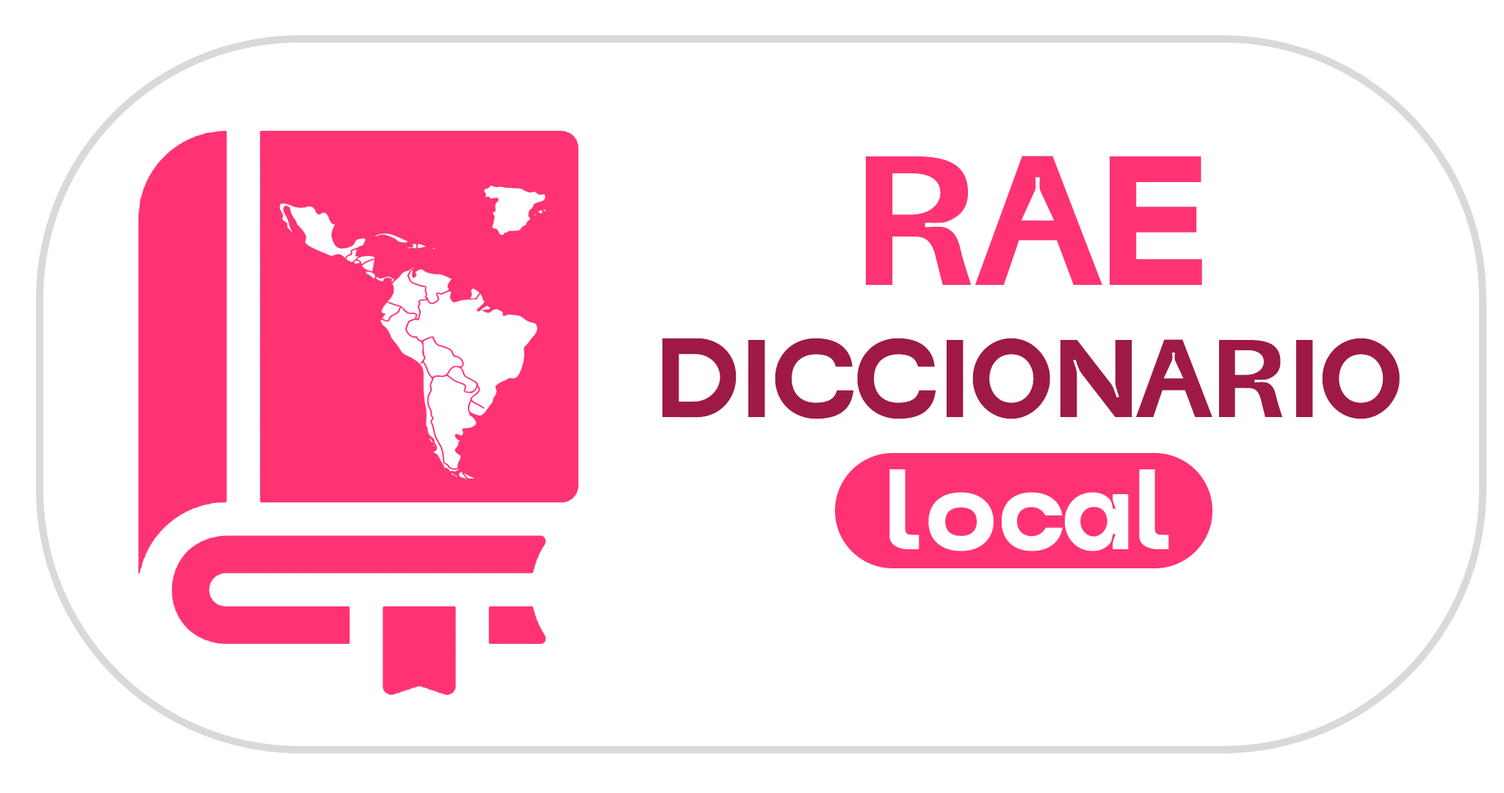
<style>
.page{position:relative;width:1504px;height:793px;background:#ffffff}
.page>*{position:absolute;margin:0}
.t1{font:110.1px "Trap-ExtraBold";color:#9e1a44}
.t2{font:183.6px "Trap-ExtraBold";color:#ff3374}
.t3{font:110.1px "Trap-ExtraBold";color:#ffffff}
</style>
<div class="page">
<p class="t1" style="left:662px;top:156px;width:737px;height:395px;text-align:center"><span class="t2">RAE<br></span>DICCIONARIO<br><span class="t3">local</span></p>
</div>
